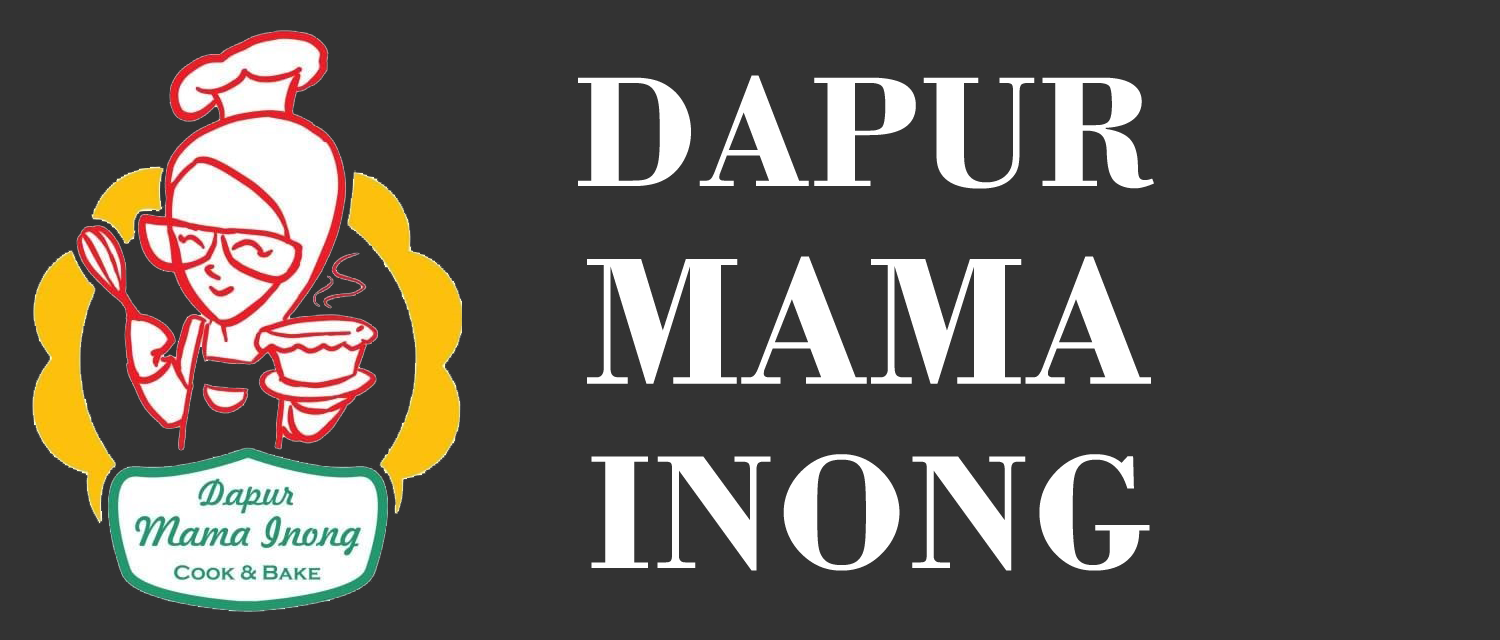
<style>
.page{position:relative;width:1500px;height:640px;background:#333333}
.page>*{position:absolute;margin:0}
.t1{font:166.7px "BodoniBT-Bold";color:#ffffff}
.t2{font:191.7px "BodoniBT-Bold";color:#ffffff}
.t3{font:162.4px "BodoniBT-Bold";color:#ffffff}
.t4{font:171.7px "BodoniBT-Bold";color:#ffffff}
</style>
<div class="page">
<p class="t1" style="left:578px;top:75px;width:576px;height:114px">DAPUR</p>
<p class="t2" style="left:587px;top:256px;width:564px;height:128px"><span class="t3"><br></span>MAMA</p>
<p class="t4" style="left:591px;top:454px;width:559px;height:117px">INONG</p>
</div>
